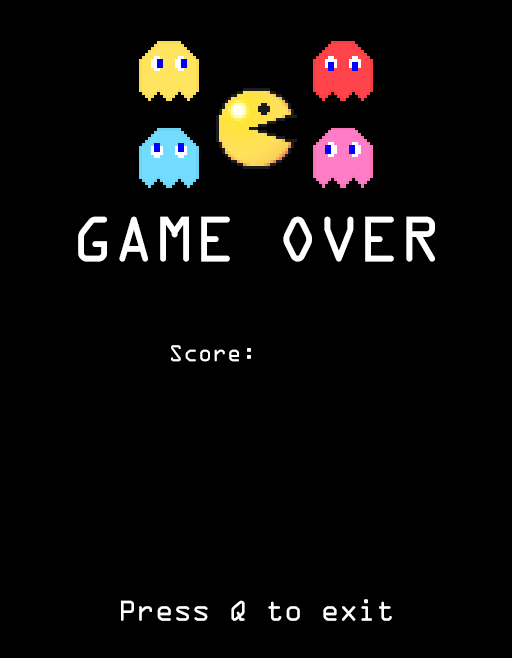
<style>
.page{position:relative;width:512px;height:658px;background:#000000}
.page>*{position:absolute;margin:0}
.t1{font:69px "OCRAExtended";letter-spacing:-0.01em;color:#ffffff}
.t2{font:24.5px "OCRAExtended";letter-spacing:-0.01em;color:#ffffff}
.t3{font:31px "OCRAExtended";letter-spacing:-0.01em;color:#ffffff}
</style>
<div class="page">
<p class="t1" style="left:78px;top:216px;width:357px;height:46px">GAME OVER</p>
<p class="t2" style="left:171px;top:345px;width:80px;height:17px">Score:</p>
<p class="t3" style="left:121px;top:599px;width:271px;height:22px">Press Q to exit</p>
</div>
